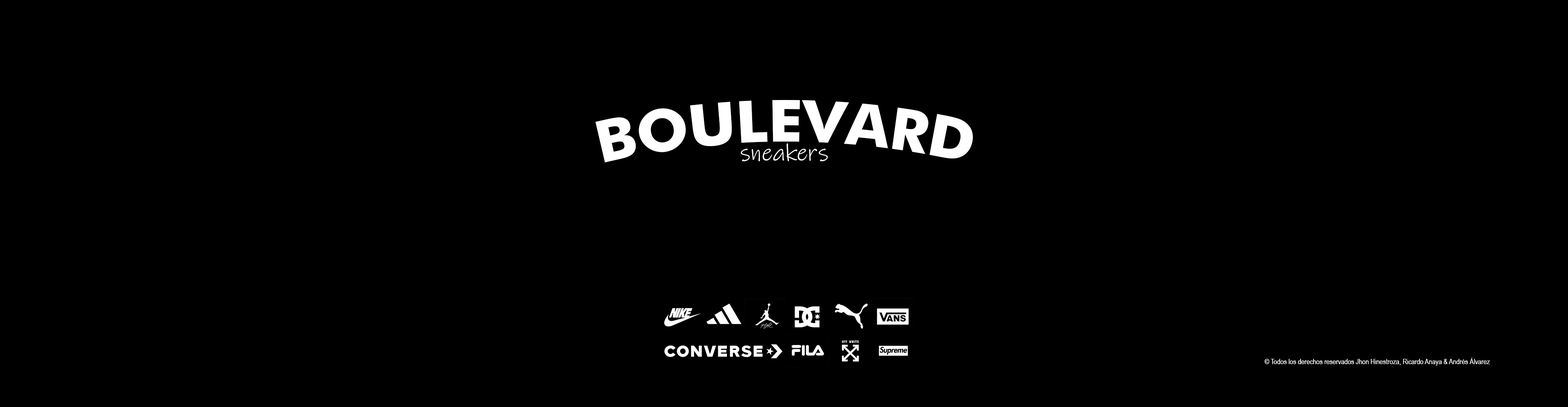
<style>
.page{position:relative;width:1568px;height:407px;background:#000000}
.page>*{position:absolute;margin:0}
.t1{font:58.1px "Futura-Bold";color:#ffffff}
.t2{font:23.9px "InkFree";color:#ffffff}
.t3{font:7.3px "ArialNarrow";color:#ffffff}
</style>
<div class="page">
<p class="t1" style="left:595px;top:100px;width:378px;height:63px">BOULEVARD</p>
<p class="t2" style="left:741px;top:143px;width:87px;height:18px">sneakers</p>
<p class="t3" style="left:1265px;top:358px;width:225px;height:8px">© Todos los derechos reservados Jhon Hinestroza, Ricardo Anaya &amp; Andrés Álvarez</p>
</div>
